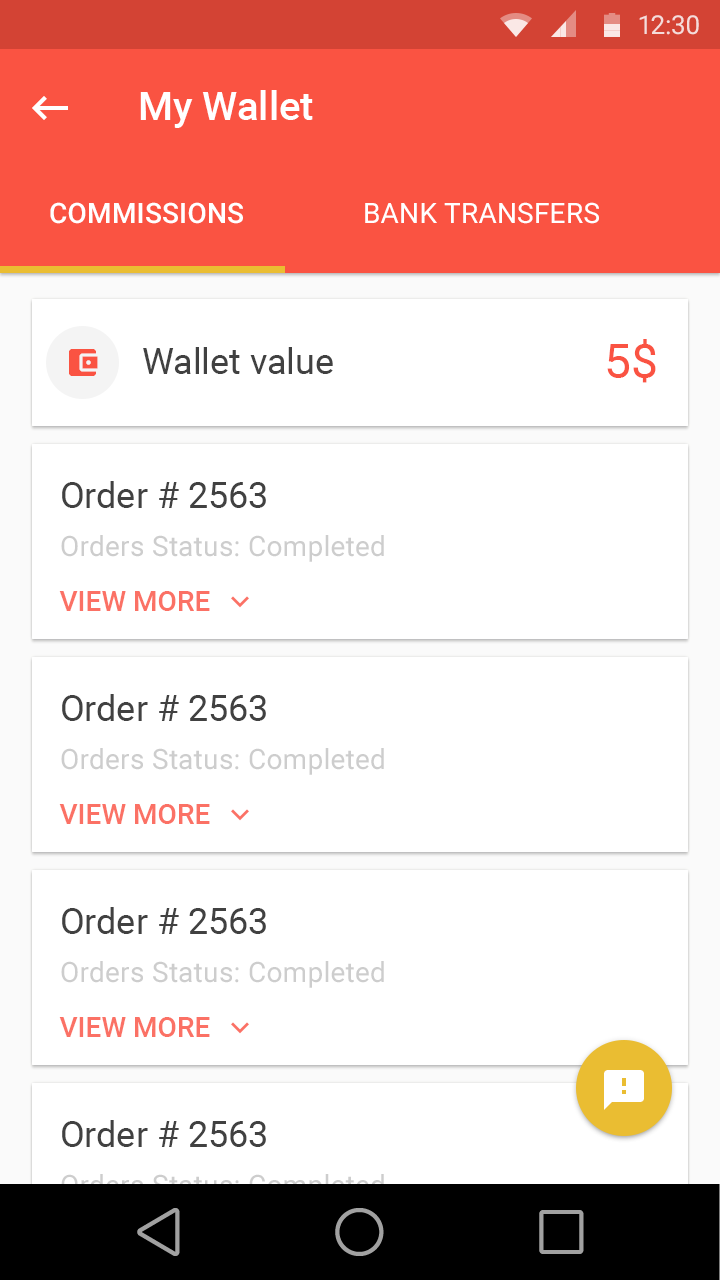
<style>
.page{position:relative;width:720px;height:1280px;background:#ffffff}
.page>*{position:absolute;margin:0}
.t1{font:40px "Roboto-Medium";color:#ffffff}
.t2{font:28px "Roboto-Medium";letter-spacing:0.01em;color:#ffffff;text-transform:uppercase}
.t3{font:28px "Roboto-Regular";letter-spacing:0.01em;color:#ffffff;text-transform:uppercase}
.t4{font:48px "Roboto-Regular";color:#fa5342;text-transform:uppercase}
.t5{font:36px "Roboto-Regular";color:#414141}
.t6{font:28px "Roboto-Regular";letter-spacing:0.01em;color:#cdcdcd}
.t7{font:28px "Roboto-Medium";color:#fb7165;text-transform:uppercase}
</style>
<div class="page">
<p class="t1" style="left:140px;top:90px;width:173px;height:38px">My Wallet</p>
<p class="t2" style="left:50px;top:202px;width:193px;height:22px">Commissions</p>
<p class="t3" style="left:365px;top:202px;width:234px;height:22px">Bank Transfers</p>
<p class="t4" style="left:607px;top:339px;width:49px;height:44px">5$</p>
<p class="t5" style="left:143px;top:347px;width:190px;height:27px">Wallet value</p>
<p class="t5" style="left:62px;top:481px;width:204px;height:27px">Order # 2563</p>
<p class="t6" style="left:61px;top:535px;width:323px;height:27px">Orders Status: Completed</p>
<p class="t7" style="left:59px;top:591px;width:151px;height:20px">View More</p>
<p class="t5" style="left:62px;top:694px;width:204px;height:27px">Order # 2563</p>
<p class="t6" style="left:61px;top:748px;width:323px;height:27px">Orders Status: Completed</p>
<p class="t7" style="left:59px;top:804px;width:151px;height:20px">View More</p>
<p class="t5" style="left:62px;top:907px;width:204px;height:27px">Order # 2563</p>
<p class="t6" style="left:61px;top:961px;width:323px;height:27px">Orders Status: Completed</p>
<p class="t7" style="left:59px;top:1017px;width:151px;height:20px">View More</p>
<p class="t5" style="left:62px;top:1120px;width:204px;height:27px">Order # 2563</p>
</div>
